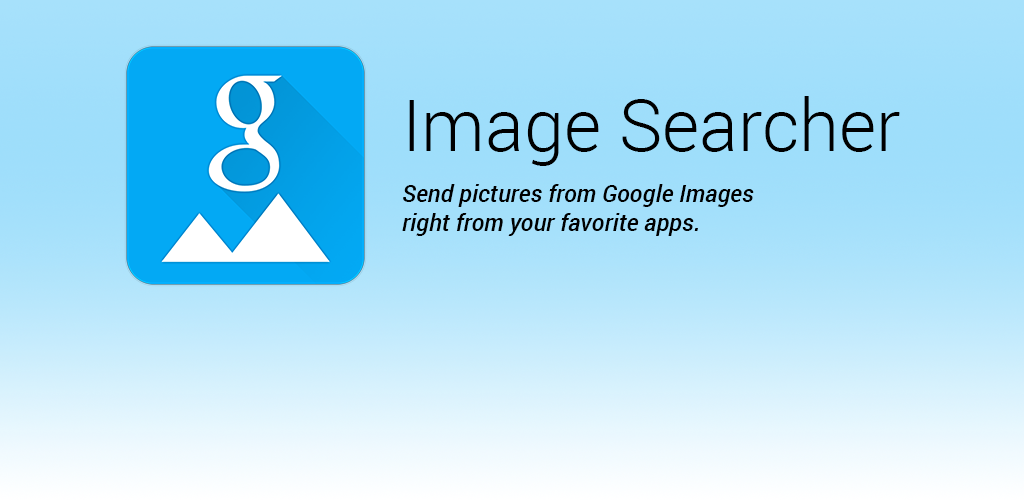
<style>
.page{position:relative;width:1024px;height:500px}
.page>*{position:absolute;margin:0}
.t1{font:72px "Roboto-Light";color:#000000}
.t2{font:24px "Roboto-MediumItalic";color:#000000}
</style>
<div class="page">
<p class="t1" style="left:409px;top:96px;width:491px;height:70px">Image Searcher</p>
<p class="t2" style="left:402px;top:184px;width:352px;height:52px">Send pictures from Google Images<br>right from your favorite apps.</p>
</div>
